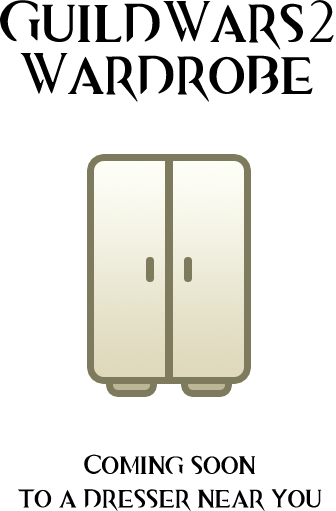
<style>
.page{position:relative;width:336px;height:511px;background:#ffffff}
.page>*{position:absolute;margin:0}
.t1{font:59px/52px "GWTwoFontVersion1.1";color:#000000}
.t2{font:28px "GWTwoFontVersion1.1";color:#000000}
</style>
<div class="page">
<p class="t1" style="left:0px;top:0px;width:334px;height:102px;text-align:center">GuildWars2<br>Wardrobe</p>
<p class="t2" style="left:18px;top:454px;width:304px;height:57px;text-align:center">Coming soon<br>to a dresser near you</p>
</div>
